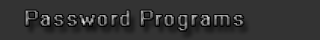
<style>
.page{position:relative;width:320px;height:40px;background:#333333}
.page>*{position:absolute;margin:0}
.t1{font:20px "System";letter-spacing:0.05em}
</style>
<div class="page">
<p class="t1" style="left:25px;top:10px;width:219px;height:21px">Password Programs</p>
</div>
